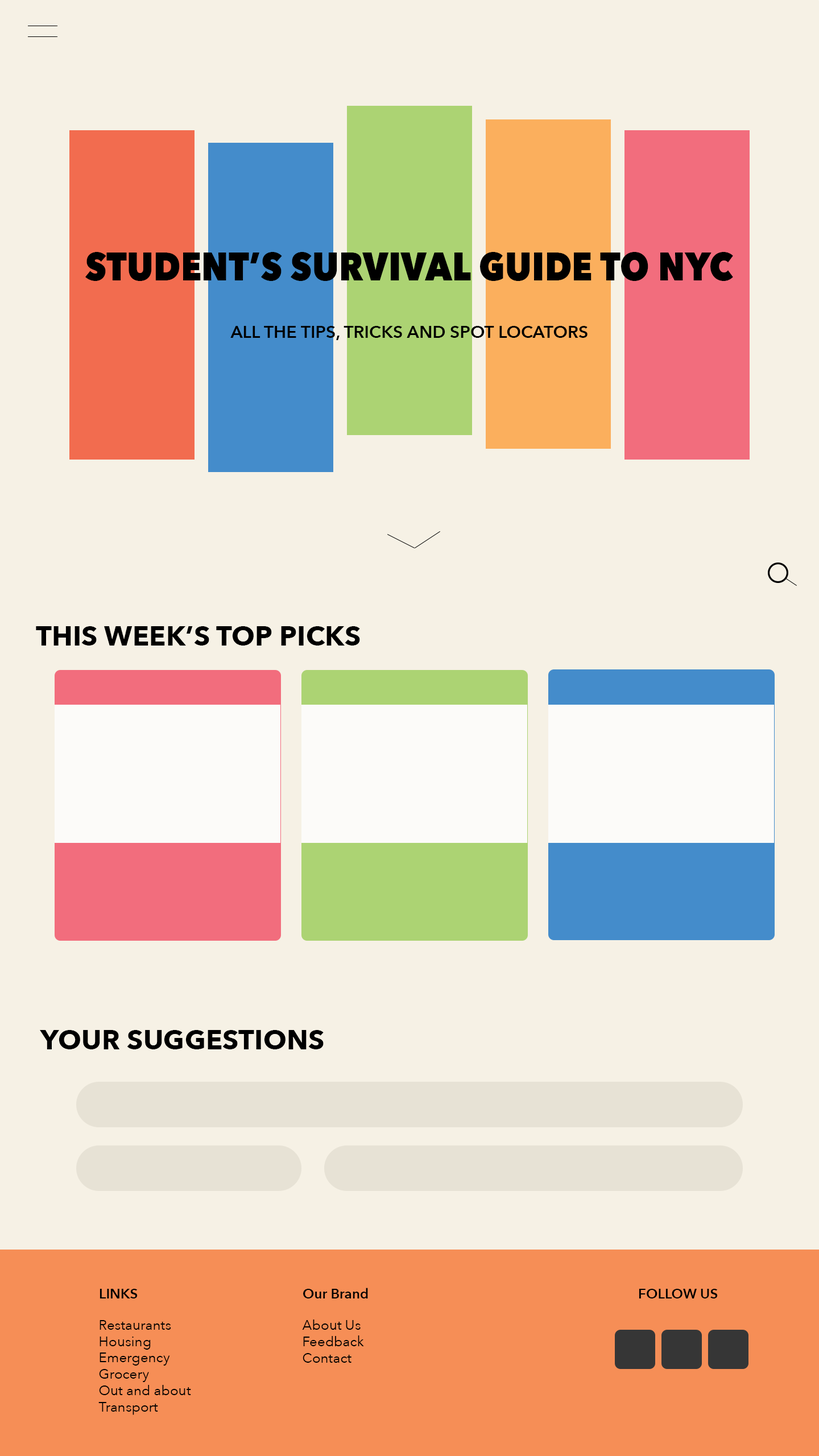
<style>
.page{position:relative;width:819px;height:1456px;background:#f6f1e5}
.page>*{position:absolute;margin:0}
.t1{font:39.2px "AvenirNext-Heavy";letter-spacing:0.005em;color:#000000;scale:0.87 1}
.t2{font:17.1px "AvenirNext-DemiBold";letter-spacing:0.005em;color:#000000}
.t3{font:27.3px "AvenirNext-Bold";letter-spacing:0.005em;color:#000000}
.t4{font:13.6px "AvenirNext-DemiBold";letter-spacing:0.005em;color:#000000}
.t5{font:13.6px "AvenirNext-Regular";letter-spacing:0.005em;color:#000000}
</style>
<div class="page">
<p class="t1" style="left:85px;top:252px;width:648px;height:29px">STUDENT’S SURVIVAL GUIDE TO NYC</p>
<p class="t2" style="left:230px;top:326px;width:358px;height:14px">ALL THE TIPS, TRICKS AND SPOT LOCATORS</p>
<p class="t3" style="left:36px;top:626px;width:324px;height:20px">THIS WEEK’S TOP PICKS</p>
<p class="t3" style="left:40px;top:1030px;width:284px;height:19px">YOUR SUGGESTIONS</p>
<p class="t4" style="left:100px;top:1289px;width:38px;height:9px">LINKS</p>
<p class="t4" style="left:303px;top:1288px;width:65px;height:10px">Our Brand</p>
<p class="t4" style="left:639px;top:1289px;width:79px;height:9px">FOLLOW US</p>
<p class="t5" style="left:98px;top:1320px;width:93px;height:95px">Restaurants<br>Housing<br>Emergency<br>Grocery<br>Out and about<br>Transport</p>
<p class="t5" style="left:302px;top:1319px;width:62px;height:44px">About Us<br>Feedback<br>Contact</p>
</div>
